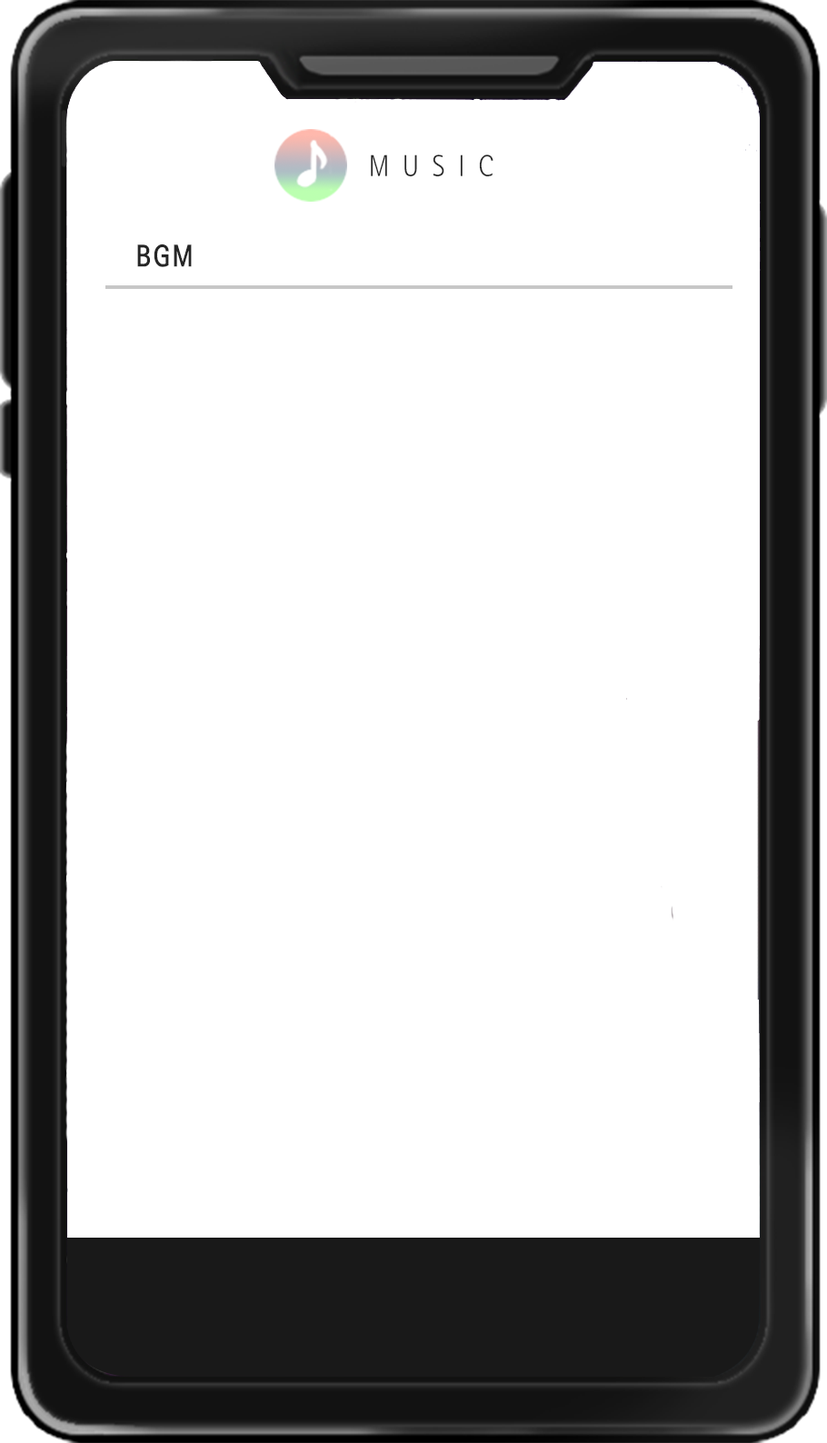
<style>
.page{position:relative;width:827px;height:1443px;background:#ffffff}
.page>*{position:absolute;margin:0}
.t1{font:30.3px "SeN-CL";letter-spacing:0.1em;color:#262626;scale:0.9 1}
.t2{font:30px "SeN-CEB";letter-spacing:0.1em;color:#262626;scale:0.91 1}
</style>
<div class="page">
<p class="t1" style="left:371px;top:154px;width:122px;height:23px">M U S I C</p>
<p class="t2" style="left:137px;top:243px;width:55px;height:24px">BGM</p>
</div>
